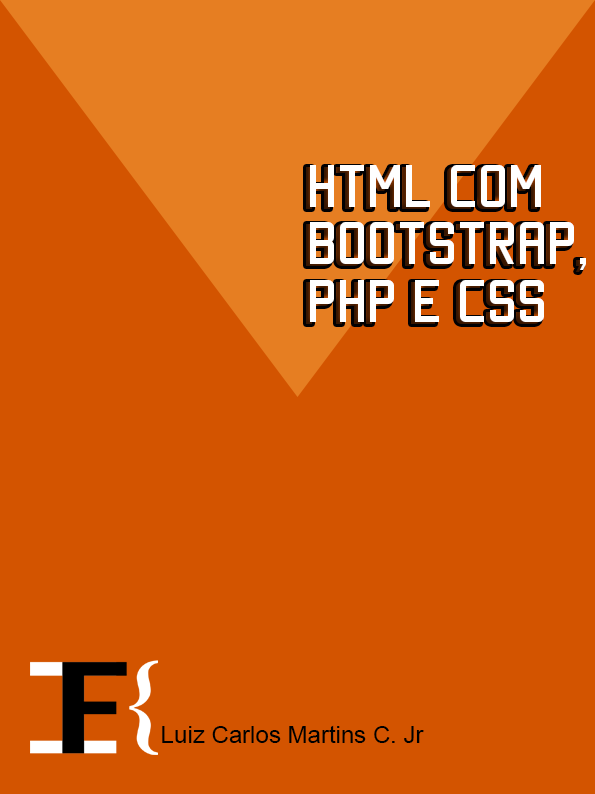
<style>
.page{position:relative;width:595px;height:794px;background:#d35400}
.page>*{position:absolute;margin:0}
.t1{font:48px "Manteka";color:#ffffff}
.t2{font:24px "ArialMT";color:#010000}
</style>
<div class="page">
<p class="t1" style="left:310px;top:165px;width:276px;height:157px">html com<br>bootstrap,<br>php e css</p>
<p class="t2" style="left:162px;top:725px;width:262px;height:18px">Luiz Carlos Martins C. Jr</p>
</div>
